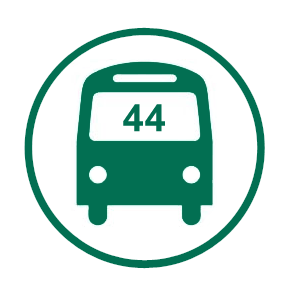
<style>
.page{position:relative;width:288px;height:288px;background:#ffffff}
.page>*{position:absolute;margin:0}
.t1{font:38px "Arial-BoldMT";color:#026f52}
</style>
<div class="page">
<p class="t1" style="left:123px;top:104px;width:42px;height:28px">44</p>
</div>
